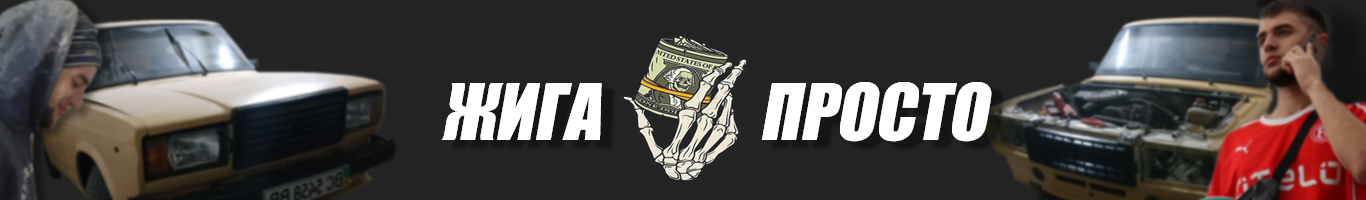
<style>
.page{position:relative;width:1366px;height:200px;background:#232323}
.page>*{position:absolute;margin:0}
.t1{font:72px "Impact";color:#ffffff;font-style:italic}
</style>
<div class="page">
<p class="t1" style="left:441px;top:83px;width:161px;height:57px">ЖИГА</p>
<p class="t1" style="left:441px;top:83px;width:161px;height:57px">ЖИГА</p>
<p class="t1" style="left:762px;top:82px;width:230px;height:60px">ПРОСТО</p>
<p class="t1" style="left:762px;top:82px;width:230px;height:60px">ПРОСТО</p>
</div>
